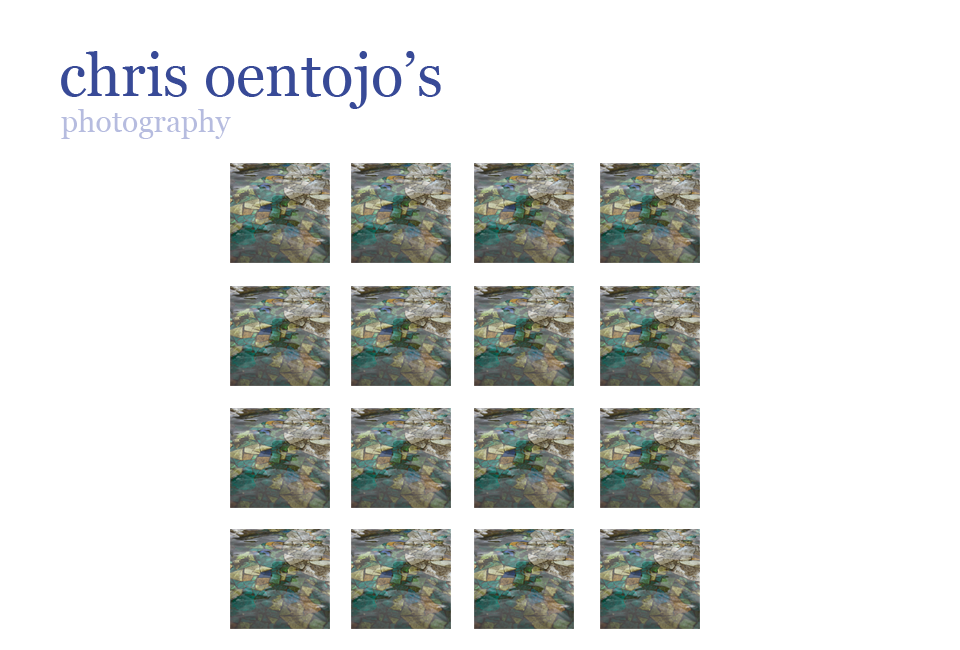
<style>
.page{position:relative;width:960px;height:650px;background:#ffffff}
.page>*{position:absolute;margin:0}
.t1{font:60px "Georgia";color:#384a97}
.t2{font:30px "Georgia";color:#b6bcdf}
</style>
<div class="page">
<p class="t1" style="left:61px;top:51px;width:380px;height:58px">chris oentojo’s</p>
<p class="t2" style="left:61px;top:109px;width:170px;height:30px">photography</p>
</div>
